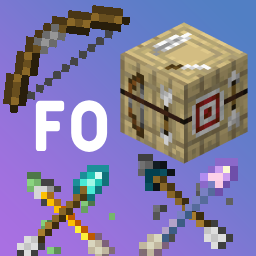
<style>
.page{position:relative;width:256px;height:256px}
.page>*{position:absolute;margin:0}
.t1{font:71px "Fulbo-Argenta";color:#ffffff}
</style>
<div class="page">
<p class="t1" style="left:35px;top:100px;width:73px;height:52px">FO</p>
</div>
